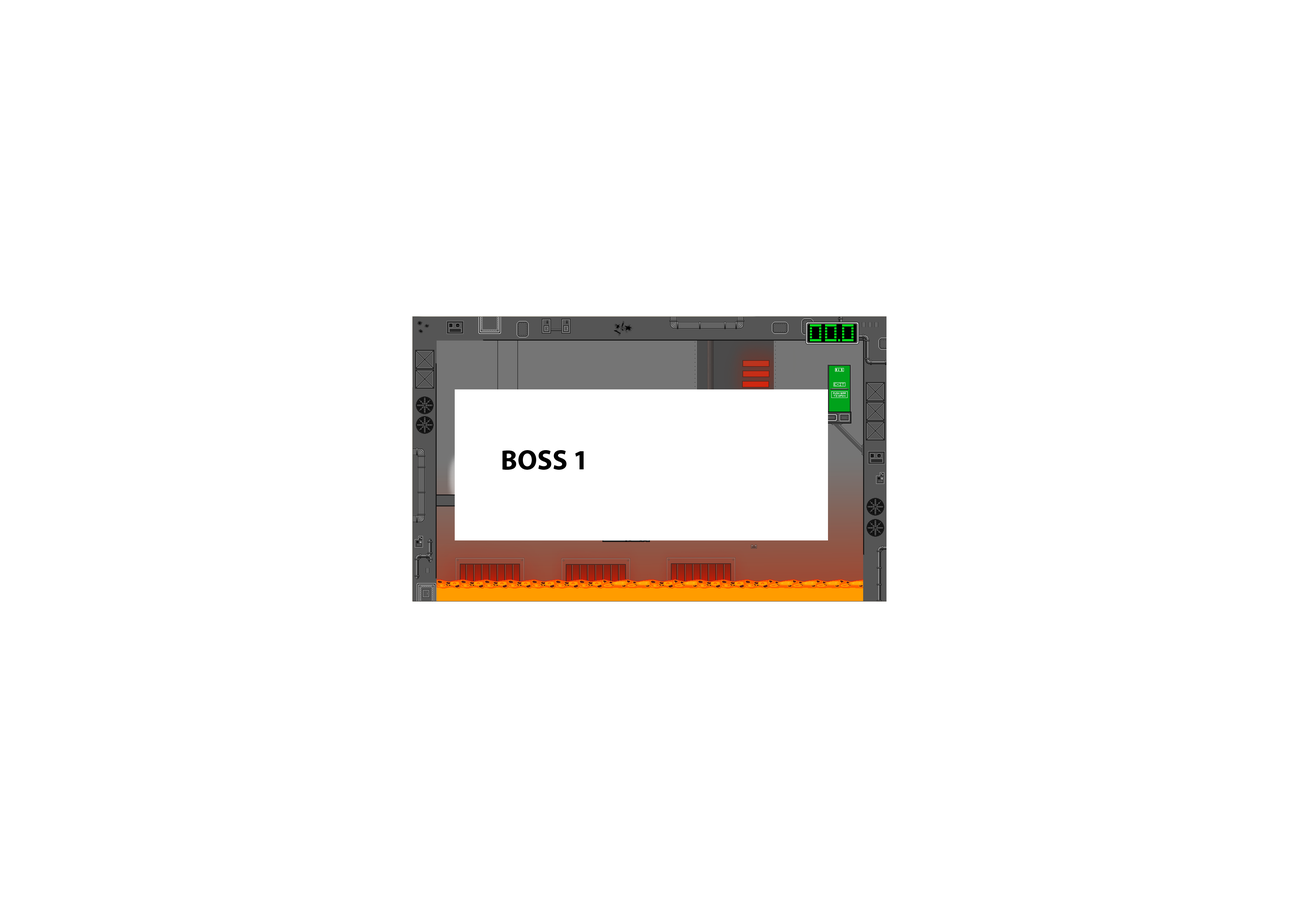
<style>
.page{position:relative;width:1299px;height:918px;background:#ffffff}
.page>*{position:absolute;margin:0}
.t1{font:27.8px "MyriadPro-Bold";color:#000000}
</style>
<div class="page">
<p class="t1" style="left:502px;top:450px;width:81px;height:20px">BOSS 1</p>
</div>
